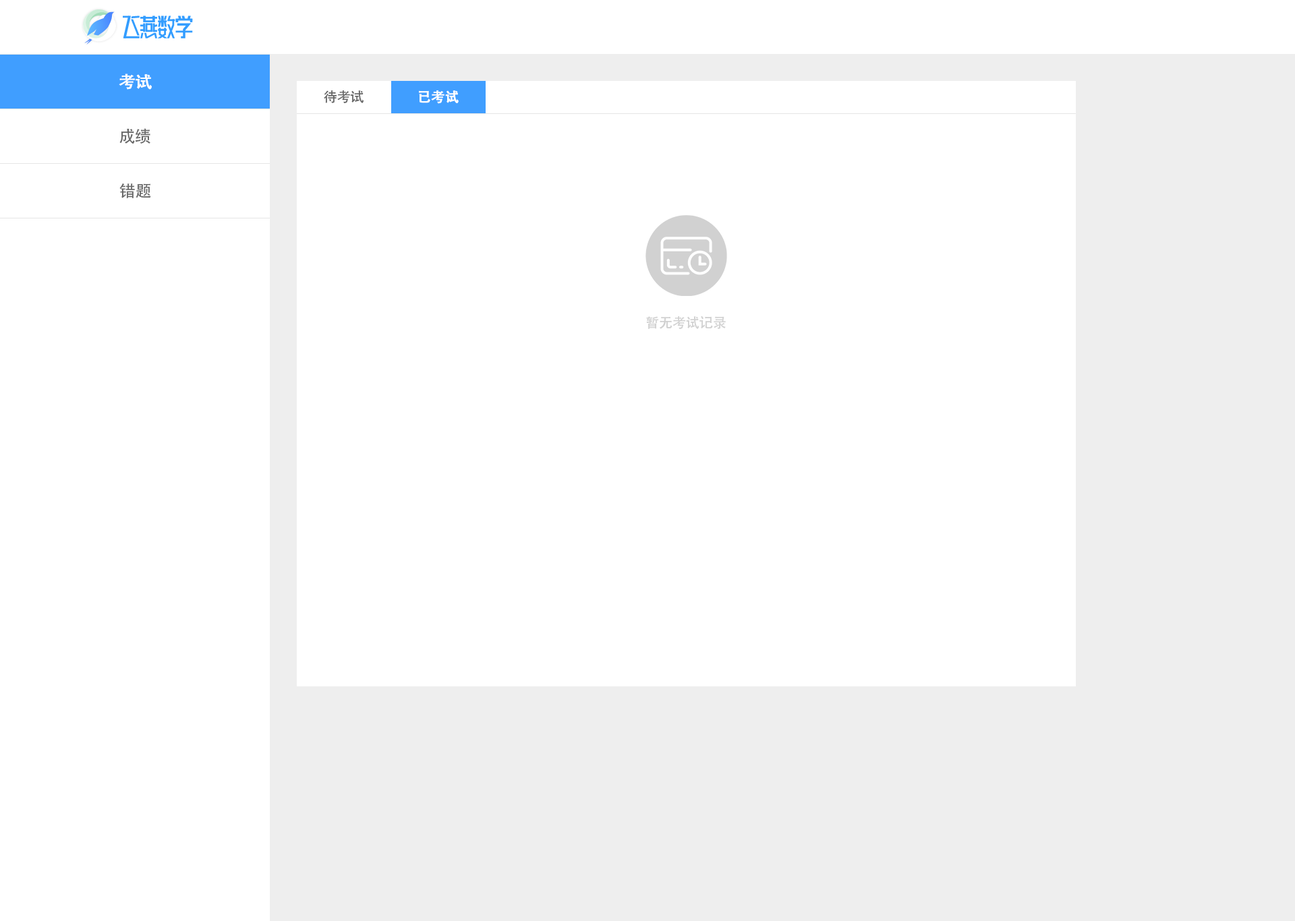
<style>
.page{position:relative;width:1295px;height:921px;background:#ffffff}
.page>*{position:absolute;margin:0}
.t1{font:16.2px "AdobeHeitiStd-Regular";color:#ffffff;font-weight:bold}
.t2{font:13.5px "AdobeHeitiStd-Regular";color:#666666}
.t3{font:13.5px "AdobeHeitiStd-Regular";color:#ffffff;font-weight:bold}
.t4{font:16.2px "AdobeHeitiStd-Regular";color:#666666}
.t5{font:13.5px "AdobeHeitiStd-Regular";color:#d1d1d1}
</style>
<div class="page">
<p class="t1" style="left:119px;top:73px;width:33px;height:17px">考试</p>
<p class="t2" style="left:324px;top:90px;width:39px;height:13px">待考试</p>
<p class="t3" style="left:419px;top:90px;width:40px;height:14px">已考试</p>
<p class="t4" style="left:119px;top:128px;width:31px;height:16px">成绩</p>
<p class="t4" style="left:119px;top:183px;width:32px;height:15px">错题</p>
<p class="t5" style="left:646px;top:316px;width:80px;height:13px">暂无考试记录</p>
</div>
